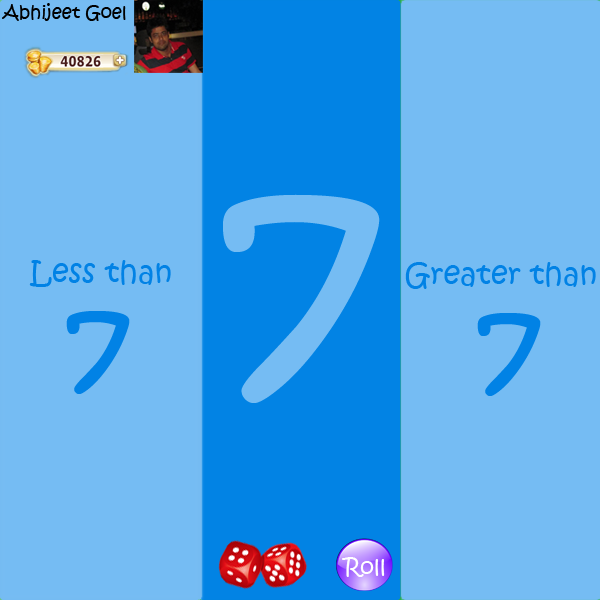
<style>
.page{position:relative;width:600px;height:600px;background:#75bcf3}
.page>*{position:absolute;margin:0}
.t1{font:18px "KristenITC-Regular";color:#000000}
.t2{font:300px "KristenITC-Regular";color:#75bcf3}
.t3{font:30px/26.8px "KristenITC-Regular";color:#0182e5}
.t4{font:120px/26.8px "KristenITC-Regular";color:#0182e5}
.t5{font:22px "KristenITC-Regular";color:#ffffff}
</style>
<div class="page">
<p class="t1" style="left:2px;top:3px;width:124px;height:18px">Abhijeet Goel</p>
<p class="t2" style="left:223px;top:194px;width:157px;height:209px">7</p>
<p class="t3" style="left:29px;top:260px;width:142px;height:134px">Less than<span class="t4"> <br><br><br><br> 7</span></p>
<p class="t3" style="left:405px;top:262px;width:191px;height:134px">Greater than<br><span class="t4"><br><br>  <br>  7</span></p>
<p class="t5" style="left:342px;top:557px;width:43px;height:20px">Roll</p>
</div>
